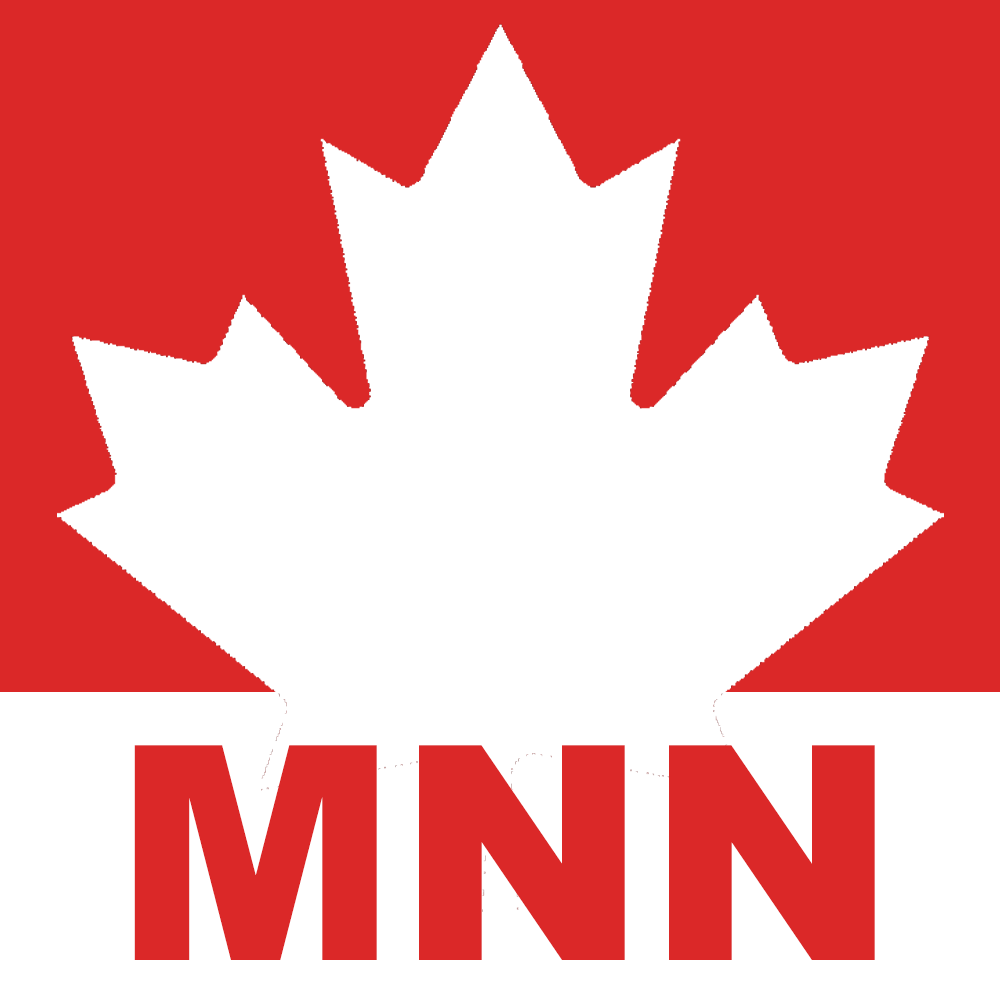
<style>
.page{position:relative;width:1000px;height:1000px;background:#ffffff}
.page>*{position:absolute;margin:0}
.t1{font:300px "Arial-Black";color:#db2828}
</style>
<div class="page">
<p class="t1" style="left:134px;top:745px;width:741px;height:215px">MNN</p>
</div>
